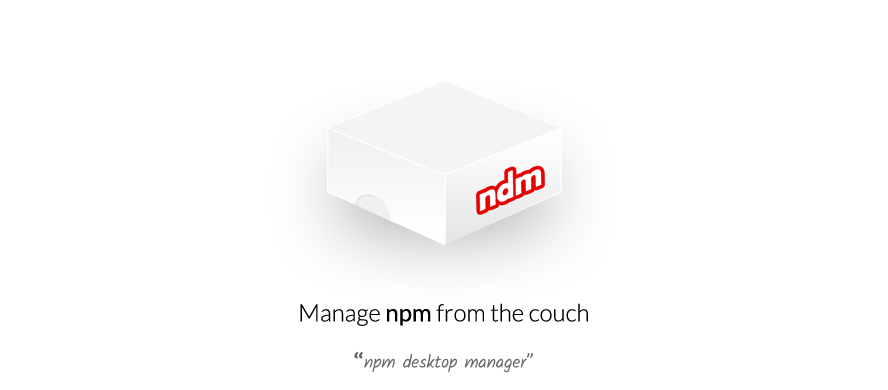
<style>
.page{position:relative;width:888px;height:390px;background:#ffffff}
.page>*{position:absolute;margin:0}
.t1{font:24px "Lato-Light";color:#000000}
.t2{font:24px "Lato-Regular";color:#000000}
.t3{font:18px "Kalam-Light";color:#686868}
.t4{font:18px "Kalam-Bold";color:#686868}
</style>
<div class="page">
<p class="t1" style="left:300px;top:303px;width:288px;height:23px">Manage<span class="t2"> npm</span> from the couch</p>
<p class="t3" style="left:354px;top:351px;width:179px;height:22px"><span class="t4">“</span>npm desktop manager”</p>
</div>
